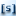
<style>
.page{position:relative;width:16px;height:16px}
.page>*{position:absolute;margin:0}
.t1{font:8.3px "Fixedsys";color:#003366}
</style>
<div class="page">
<p class="t1" style="left:1px;top:4px;width:14px;height:10px">[s]</p>
</div>
